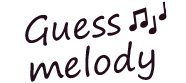
<style>
.page{position:relative;width:186px;height:83px;background:#ffffff}
.page>*{position:absolute;margin:0}
.t1{font:36px/38px "SegoePrint";color:#230d1a}
</style>
<div class="page">
<p class="t1" style="left:25px;top:13px;width:130px;height:69px;rotate:-6deg">Guess<br>melody</p>
</div>
